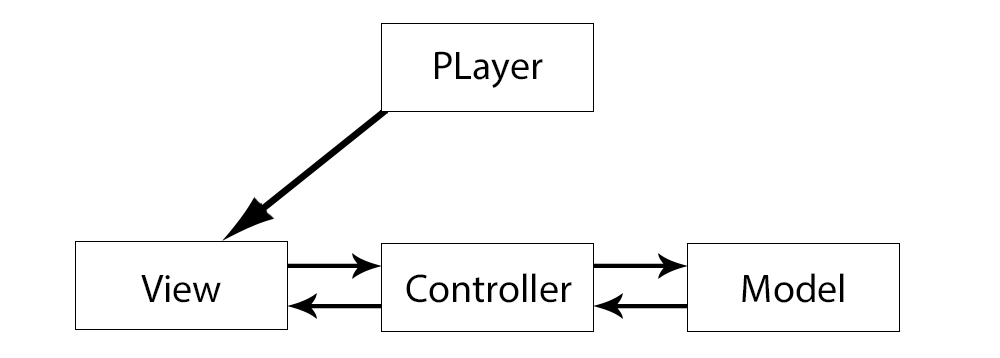
<style>
.page{position:relative;width:1000px;height:358px;background:#ffffff}
.page>*{position:absolute;margin:0}
.t1{font:40px "MyriadPro-Regular";color:#000000}
</style>
<div class="page">
<p class="t1" style="left:435px;top:51px;width:108px;height:37px">PLayer</p>
<p class="t1" style="left:141px;top:275px;width:80px;height:28px">View</p>
<p class="t1" style="left:406px;top:273px;width:166px;height:30px">Controller</p>
<p class="t1" style="left:742px;top:273px;width:102px;height:30px">Model</p>
</div>
